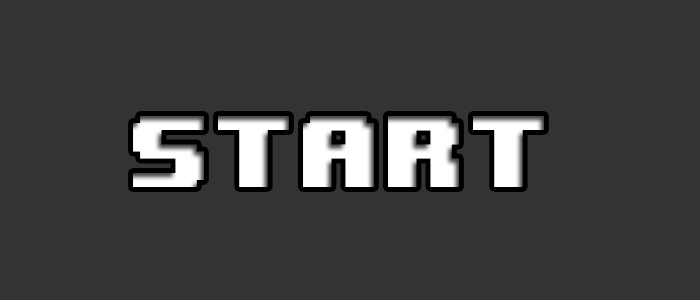
<style>
.page{position:relative;width:700px;height:300px;background:#333333}
.page>*{position:absolute;margin:0}
.t1{font:85px "8BITWONDERNominal";color:#ffffff}
</style>
<div class="page">
<p class="t1" style="left:133px;top:116px;width:411px;height:71px">start</p>
</div>
